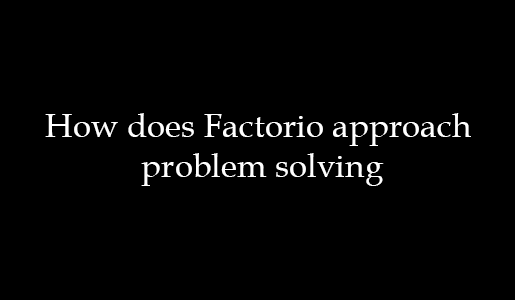
<style>
.page{position:relative;width:515px;height:300px;background:#000000}
.page>*{position:absolute;margin:0}
.t1{font:33.3px "BookAntiqua";color:#ffffff}
</style>
<div class="page">
<p class="t1" style="left:45px;top:113px;width:426px;height:73px;text-align:center">How does Factorio approach <br>problem solving</p>
</div>
